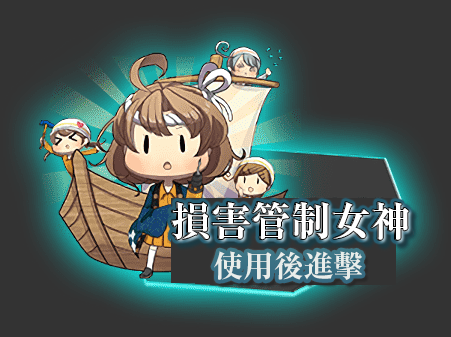
<style>
.page{position:relative;width:451px;height:337px;background:#333333}
.page>*{position:absolute;margin:0}
.t1{font:40px "RyuminPr6N-ExBold";color:#ffffff}
.t2{font:30px "RyuminPr6N-ExBold";color:#e9edea}
</style>
<div class="page">
<p class="t1" style="left:171px;top:202px;width:237px;height:38px">損害管制女神</p>
<p class="t1" style="left:172px;top:202px;width:237px;height:38px">損害管制女神</p>
<p class="t2" style="left:214px;top:251px;width:148px;height:29px">使用後進擊</p>
</div>
